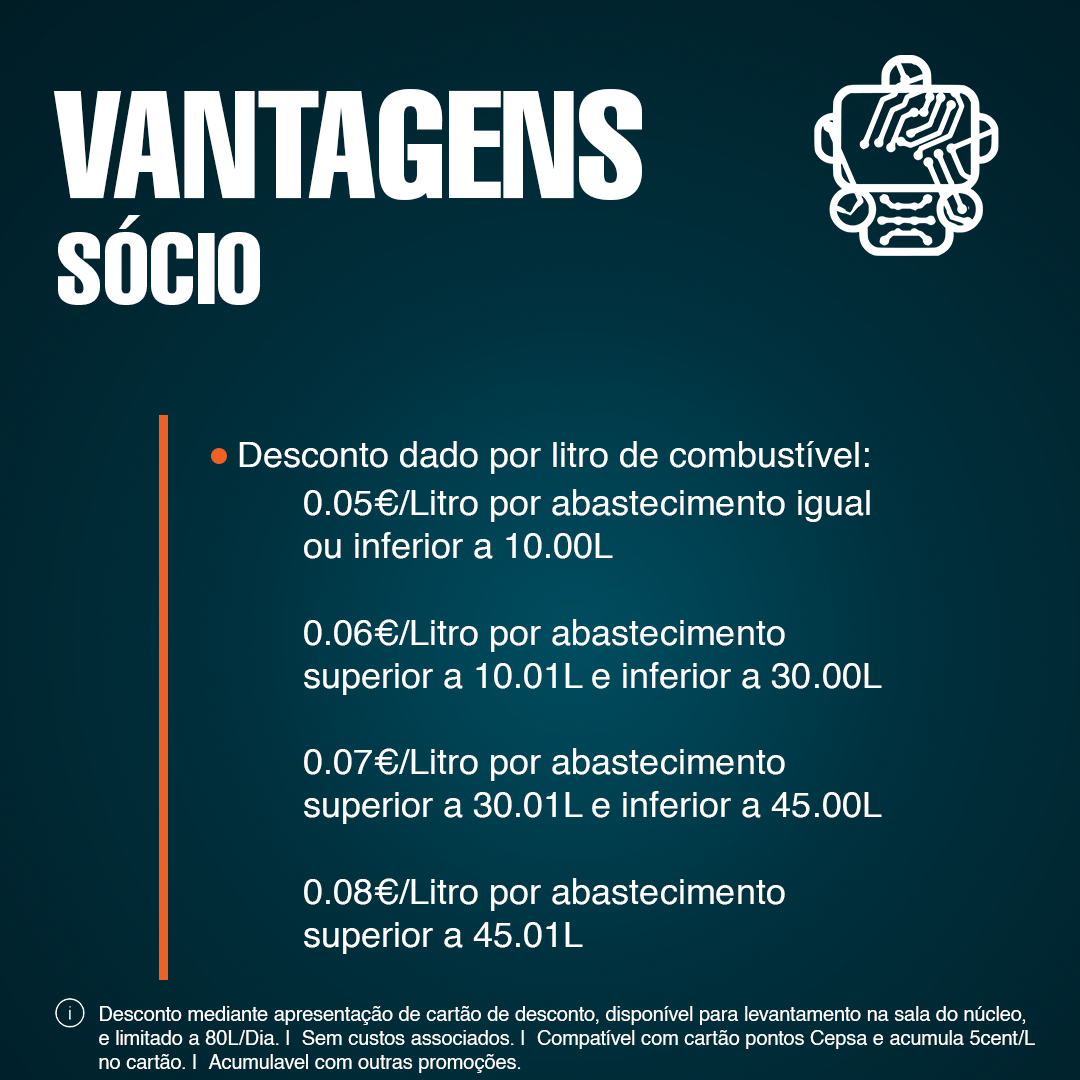
<style>
.page{position:relative;width:1080px;height:1080px}
.page>*{position:absolute;margin:0}
.t1{font:150px "Helvetica-Compressed";color:#ffffff}
.t2{font:100px "Helvetica-Compressed";color:#ffffff}
.t3{font:36px "Helvetica";color:#ffffff}
.t4{font:20px "Helvetica";color:#ffffff}
</style>
<div class="page">
<p class="t1" style="left:54px;top:89px;width:588px;height:111px">VANTAGENS</p>
<p class="t2" style="left:58px;top:215px;width:202px;height:90px">SÓCIO</p>
<p class="t3" style="left:239px;top:441px;width:630px;height:33px">Desconto dado por litro de combustível:</p>
<p class="t3" style="left:304px;top:489px;width:578px;height:465px">0.05€/Litro por abastecimento igual <br>ou inferior a 10.00L<br><br>0.06€/Litro por abastecimento<br>superior a 10.01L e inferior a 30.00L<br><br>0.07€/Litro por abastecimento<br>superior a 30.01L e inferior a 45.00L<br><br>0.08€/Litro por abastecimento<br>superior a 45.01L</p>
<p class="t4" style="left:99px;top:1006px;width:936px;height:67px">Desconto mediante apresentação de cartão de desconto, disponível para levantamento na sala do núcleo, <br>e limitado a 80L/Dia. |  Sem custos associados. |  Compatível com cartão pontos Cepsa e acumula 5cent/L <br>no cartão. |  Acumulavel com outras promoções.</p>
</div>
